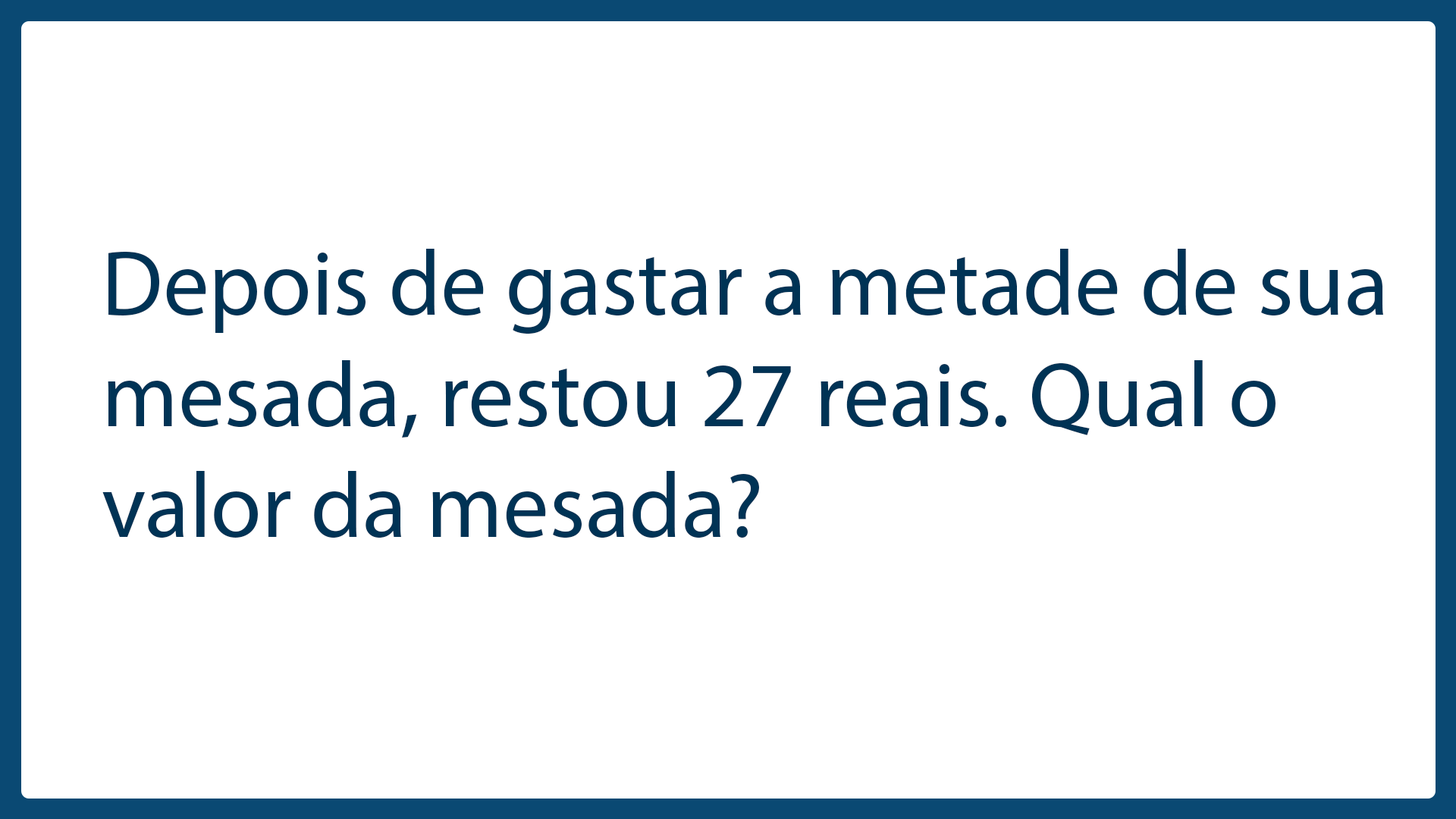
<style>
.page{position:relative;width:1456px;height:819px;background:#ffffff}
.page>*{position:absolute;margin:0}
.t1{font:92.6px "MyriadPro-Regular";color:#003355}
</style>
<div class="page">
<p class="t1" style="left:102px;top:249px;width:1281px;height:289px">Depois de gastar a metade de sua mesada, restou 27 reais. Qual o valor da mesada?</p>
</div>
